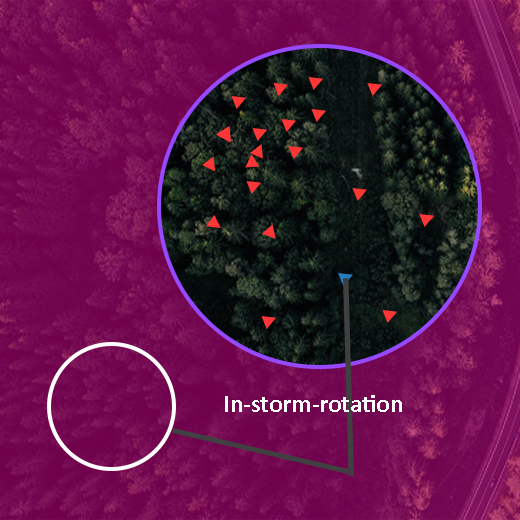
<style>
.page{position:relative;width:520px;height:520px}
.page>*{position:absolute;margin:0}
.t1{font:25px "Calibri-Bold";color:#ffffff}
</style>
<div class="page">
<p class="t1" style="left:225px;top:395px;width:177px;height:17px">In-storm-rotation</p>
</div>
